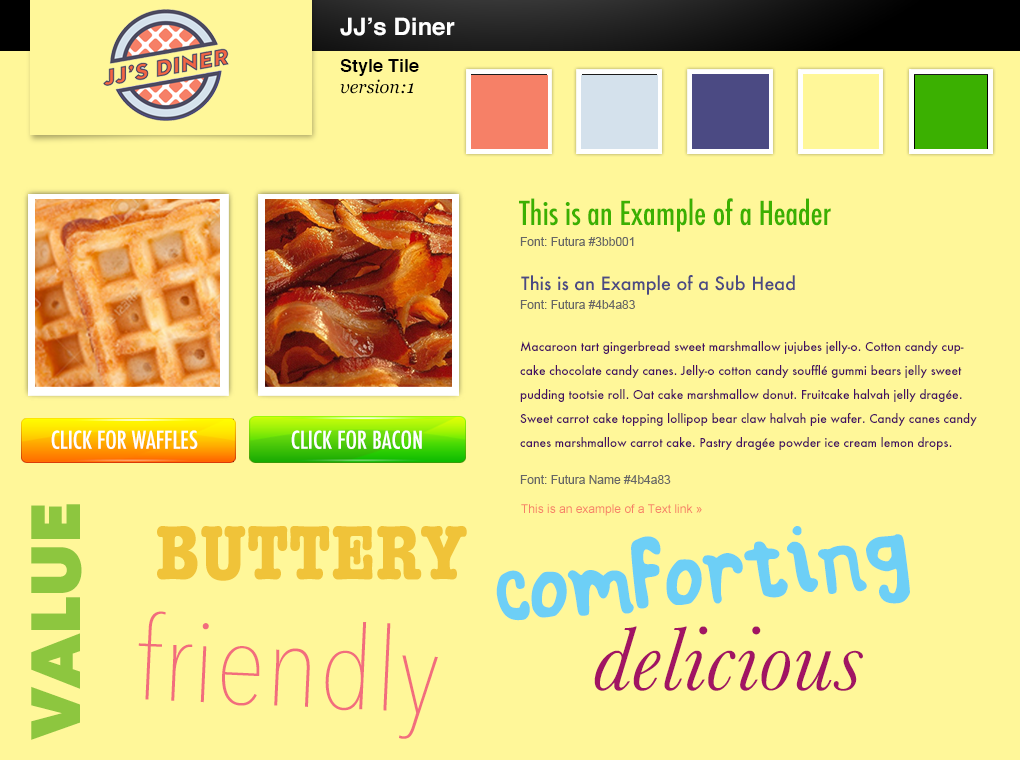
<style>
.page{position:relative;width:1020px;height:760px;background:#fff799}
.page>*{position:absolute;margin:0}
.t1{font:24px "Helvetica-Bold";color:#ffffff}
.t2{font:18px "Helvetica-Bold";color:#000000}
.t3{font:18px "Georgia-Italic";color:#000000}
.t4{font:32px "Futura-CondensedMedium";color:#3bb001}
.t5{font:12px "ArialMT";color:#666666}
.t6{font:18px "Futura-Medium";color:#4b4a83}
.t7{font:12px/24px "Futura-Medium";color:#440e62}
.t8{font:24px "Futura-CondensedMedium";color:#ffffff}
.t9{font:68.7px "AvenirNext-Heavy";color:#8dc63f}
.t10{font:12px "ArialMT";color:#f68067}
.t11{font:79.4px "AmericanTypewriter-CondensedBold";color:#f0c339}
.t12{font:134.7px "bundafont";color:#6dcff6}
.t13{font:115.2px "AvenirNextCondensed-UltraLight";color:#f26d7d;scale:1.1 1}
.t14{font:94.1px "Baskerville-Italic";color:#a11463}
</style>
<div class="page">
<p class="t1" style="left:340px;top:17px;width:115px;height:19px">JJ’s Diner</p>
<p class="t2" style="left:340px;top:59px;width:79px;height:17px">Style Tile</p>
<p class="t3" style="left:340px;top:79px;width:74px;height:15px">version:1</p>
<p class="t4" style="left:519px;top:198px;width:312px;height:34px">This is an Example of a Header</p>
<p class="t5" style="left:520px;top:237px;width:114px;height:9px">Font: Futura #3bb001</p>
<p class="t6" style="left:521px;top:275px;width:274px;height:20px">This is an Example of a Sub Head</p>
<p class="t5" style="left:520px;top:300px;width:115px;height:9px">Font: Futura #4b4a83</p>
<p class="t7" style="left:520px;top:341px;width:457px;height:109px">Macaroon tart gingerbread sweet marshmallow jujubes jelly-o. Cotton candy cupcake chocolate candy canes. Jelly-o cotton candy soufflé gummi bears jelly sweet pudding tootsie roll. Oat cake marshmallow donut. Fruitcake halvah jelly dragée. Sweet carrot cake topping lollipop bear claw halvah pie wafer. Candy canes candy canes marshmallow carrot cake. Pastry dragée powder ice cream lemon drops.</p>
<p class="t8" style="left:51px;top:430px;width:147px;height:19px">CLICK FOR WAFFLES</p>
<p class="t8" style="left:291px;top:430px;width:131px;height:19px">CLICK FOR BACON</p>
<p class="t5" style="left:520px;top:475px;width:151px;height:9px">Font: Futura Name #4b4a83</p>
<p class="t9" style="left:31px;top:504px;width:51px;height:236px;rotate:-90deg">VALUE</p>
<p class="t10" style="left:521px;top:504px;width:181px;height:12px">This is an example of a Text link »</p>
<p class="t11" style="left:157px;top:526px;width:310px;height:55px">BUTTERY</p>
<p class="t12" style="left:496px;top:526px;width:414px;height:95px;rotate:-5deg">comforting</p>
<p class="t13" style="left:138px;top:611px;width:300px;height:128px;rotate:3deg">friendly</p>
<p class="t14" style="left:594px;top:626px;width:269px;height:65px">delicious</p>
</div>
